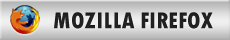
<style>
.page{position:relative;width:230px;height:40px}
.page>*{position:absolute;margin:0}
.t1{font:24px "TwCenMT-CondensedExtraBold";color:#232222}
</style>
<div class="page">
<p class="t1" style="left:54px;top:12px;width:159px;height:17px">MOZILLA FIREFOX</p>
</div>
